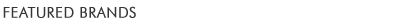
<style>
.page{position:relative;width:400px;height:24px;background:#ffffff}
.page>*{position:absolute;margin:0}
.t1{font:14.7px "FuturaBT-Light";letter-spacing:0.025em;color:#363636;text-transform:uppercase;font-weight:bold}
</style>
<div class="page">
<p class="t1" style="left:3px;top:6px;width:133px;height:12px">FEATURED BRANDS</p>
</div>
